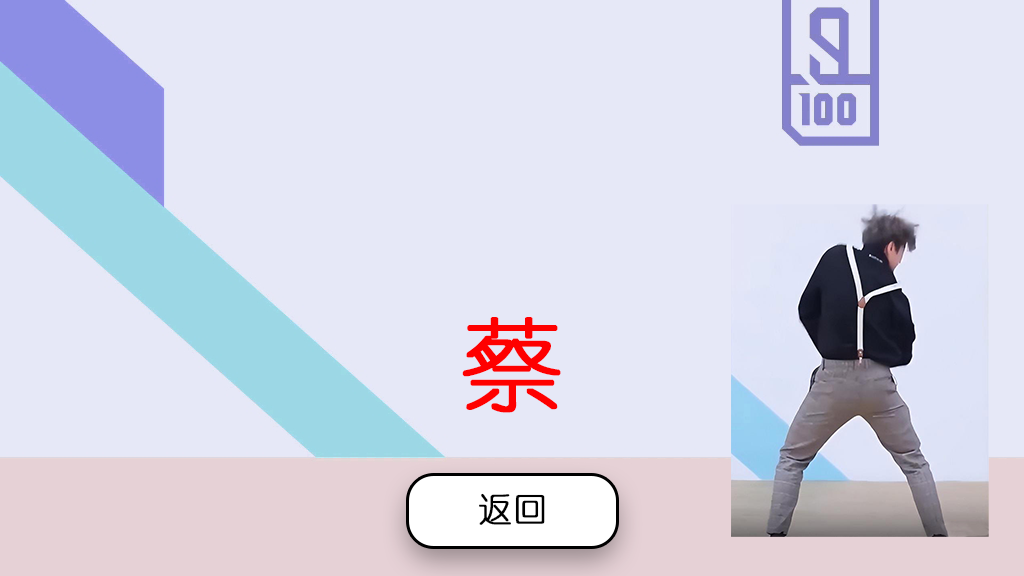
<style>
.page{position:relative;width:1024px;height:576px;background:#e6e8f7}
.page>*{position:absolute;margin:0}
.t1{font:100px "YouYuan";color:#fe0000;font-weight:bold}
.t2{font:33.3px "YouYuan";color:#000000;font-weight:bold}
</style>
<div class="page">
<p class="t1" style="left:462px;top:317px;width:99px;height:96px">蔡</p>
<p class="t2" style="left:479px;top:493px;width:66px;height:32px">返回</p>
</div>
